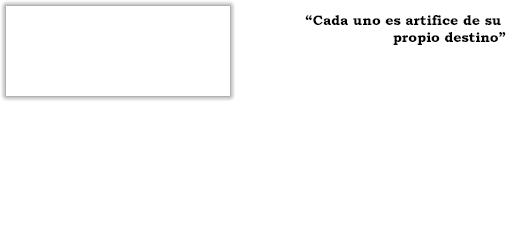
<style>
.page{position:relative;width:520px;height:230px;background:#ffffff}
.page>*{position:absolute;margin:0}
.t1{font:14px "BookmanOldStyle-Bold";color:#030303}
</style>
<div class="page">
<p class="t1" style="left:305px;top:15px;width:201px;height:30px;text-align:right">“Cada uno es artifice de su <br>propio destino”</p>
</div>
